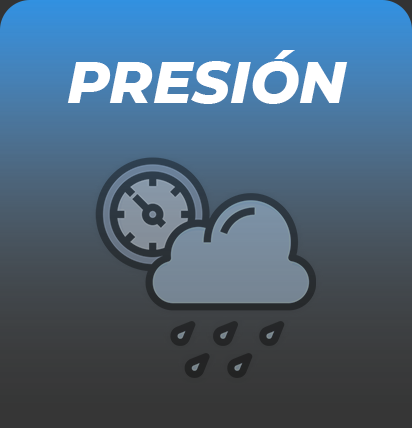
<style>
.page{position:relative;width:412px;height:428px}
.page>*{position:absolute;margin:0}
.t1{font:58.5px "Montserrat-ExtraBoldItalic";color:#ffffff}
</style>
<div class="page">
<p class="t1" style="left:67px;top:50px;width:281px;height:54px">PRESIÓN</p>
</div>
